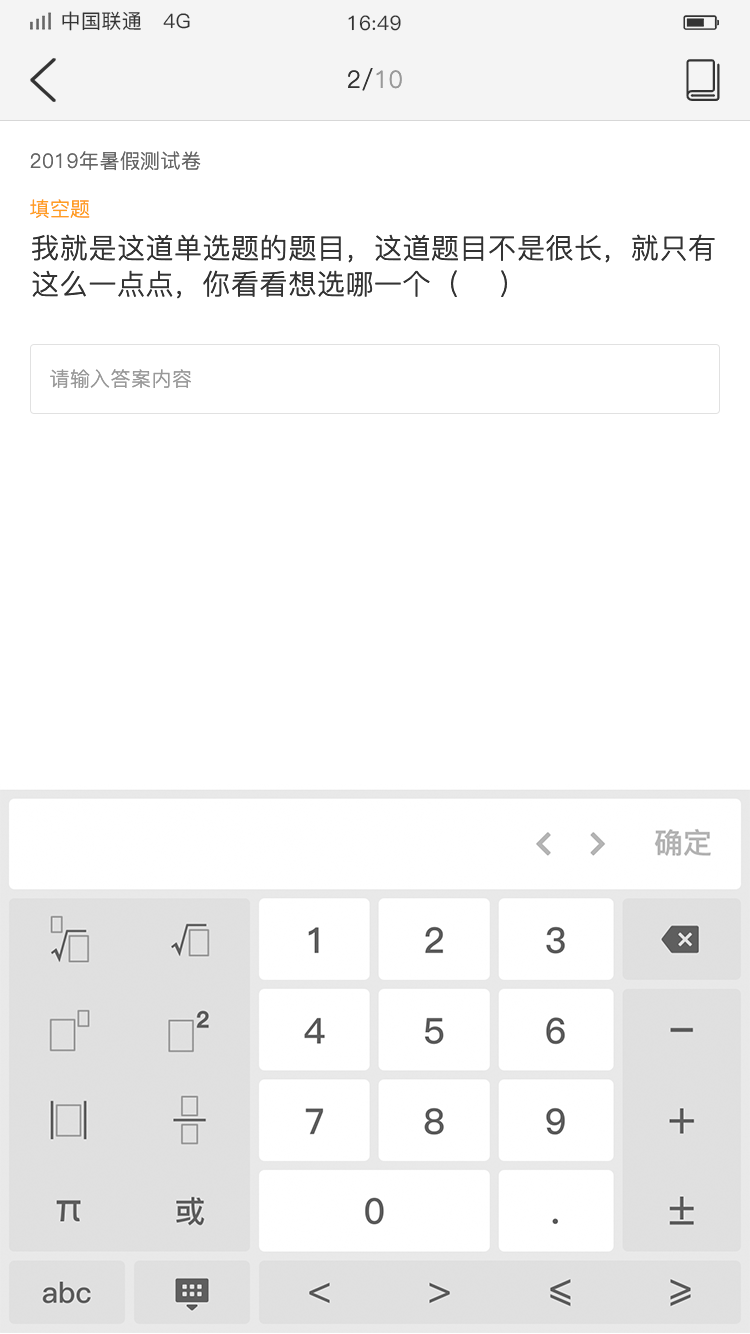
<style>
.page{position:relative;width:750px;height:1334px;background:#ffffff}
.page>*{position:absolute;margin:0}
.t1{font:20px "PingFang-SC-Medium";letter-spacing:0.02em;color:#333333}
.t2{font:24px "PingFang-SC-Regular";letter-spacing:0.02em;color:#333333}
.t3{font:24px "PingFang-SC-Regular";letter-spacing:0.02em;color:#999999}
.t4{font:20px "PingFang-SC-Regular";letter-spacing:0.02em;color:#666666}
.t5{font:20px "PingFang-SC-Regular";letter-spacing:0.02em;color:#ff9e21}
.t6{font:28px/36px "PingFang-SC-Regular";letter-spacing:0.02em;color:#333333}
.t7{font:20px "PingFang-SC-Regular";letter-spacing:0.02em;color:#999999}
</style>
<div class="page">
<p class="t1" style="left:62px;top:11px;width:128px;height:20px">中国联通   4G</p>
<p class="t1" style="left:348px;top:15px;width:53px;height:16px">16:49</p>
<p class="t2" style="left:348px;top:68px;width:54px;height:23px">2/<span class="t3">10</span></p>
<p class="t4" style="left:30px;top:151px;width:171px;height:20px">2019年暑假测试卷</p>
<p class="t5" style="left:30px;top:199px;width:60px;height:19px">填空题</p>
<p class="t6" style="left:32px;top:234px;width:683px;height:65px">我就是这道单选题的题目，这道题目不是很长，就只有这么一点点，你看看想选哪一个（    ）</p>
<p class="t7" style="left:50px;top:369px;width:141px;height:19px">请输入答案内容</p>
</div>
